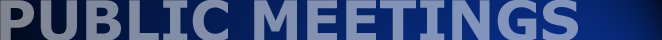
<style>
.page{position:relative;width:662px;height:40px}
.page>*{position:absolute;margin:0}
.t1{font:56px "Verdana-Bold";letter-spacing:-0.005em;color:#8290b1}
</style>
<div class="page">
<p class="t1" style="left:0px;top:0px;width:578px;height:42px">PUBLIC MEETINGS</p>
</div>
